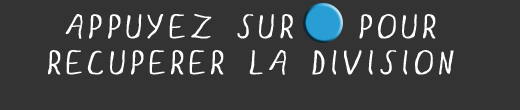
<style>
.page{position:relative;width:520px;height:110px;background:#333333}
.page>*{position:absolute;margin:0}
.t1{font:30px "GLOO";letter-spacing:0.01em;color:#ffffff;font-weight:bold}
</style>
<div class="page">
<p class="t1" style="left:48px;top:14px;width:406px;height:61px;text-align:center">APPUYEZ SUR   POUR<br>RECUPERER LA DIVISION</p>
</div>
